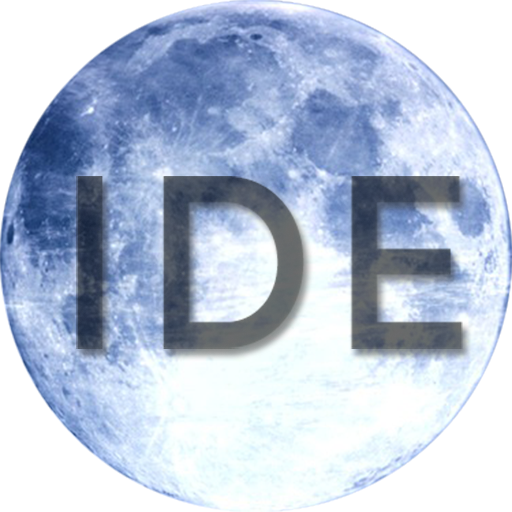
<style>
.page{position:relative;width:512px;height:512px;background:#ffffff}
.page>*{position:absolute;margin:0}
.t1{font:245.8px "Montserrat-Regular";letter-spacing:0.1em;scale:0.88 1}
</style>
<div class="page">
<p class="t1" style="left:76px;top:176px;width:387px;height:173px">IDE</p>
</div>
